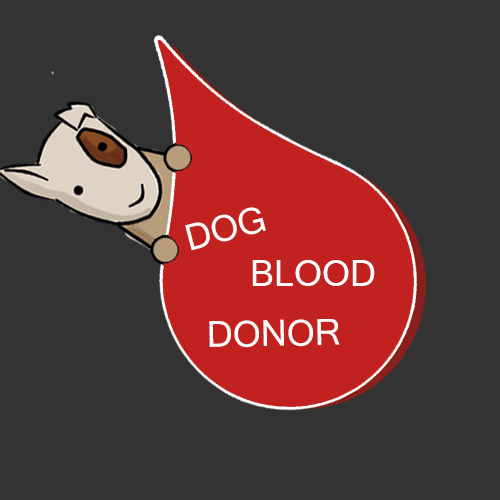
<style>
.page{position:relative;width:500px;height:500px;background:#333333}
.page>*{position:absolute;margin:0}
.t1{font:36px "MicrosoftSansSerif";color:#fdfcfc}
</style>
<div class="page">
<p class="t1" style="left:185px;top:207px;width:81px;height:44px;rotate:-15deg">DOG</p>
<p class="t1" style="left:252px;top:260px;width:123px;height:26px">BLOOD</p>
<p class="t1" style="left:209px;top:319px;width:131px;height:29px;rotate:-1deg">DONOR</p>
</div>
